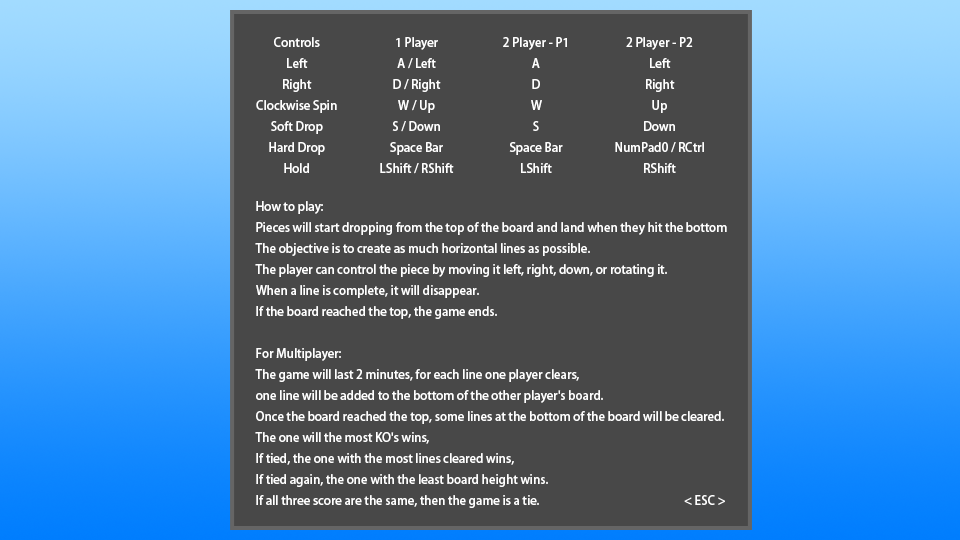
<style>
.page{position:relative;width:960px;height:540px;background:#484848}
.page>*{position:absolute;margin:0}
.t1{font:12px "AdobeFanHeitiStd-Bold";color:#ffffff}
</style>
<div class="page">
<p class="t1" style="left:256px;top:37px;width:81px;height:136px;text-align:center">Controls<br>Left<br>Right<br>Clockwise Spin<br>Soft Drop<br>Hard Drop<br>Hold</p>
<p class="t1" style="left:380px;top:37px;width:74px;height:137px;text-align:center">1 Player<br>A / Left<br>D / Right<br>W / Up<br>S / Down<br>Space Bar<br>LShift / RShift</p>
<p class="t1" style="left:503px;top:37px;width:64px;height:136px;text-align:center">2 Player - P1<br>A<br>D<br>W<br>S<br>Space Bar<br>LShift</p>
<p class="t1" style="left:615px;top:37px;width:89px;height:136px;text-align:center">2 Player - P2<br>Left<br>Right<br>Up<br>Down<br>NumPad0 / RCtrl<br>RShift</p>
<p class="t1" style="left:255px;top:201px;width:472px;height:307px">How to play:<br>Pieces will start dropping from the top of the board and land when they hit the bottom<br>The objective is to create as much horizontal lines as possible.<br>The player can control the piece by moving it left, right, down, or rotating it.<br>When a line is complete, it will disappear.<br>If the board reached the top, the game ends.<br><br>For Multiplayer:<br>The game will last 2 minutes, for each line one player clears, <br>one line will be added to the bottom of the other player's board.<br>Once the board reached the top, some lines at the bottom of the board will be cleared.<br>The one will the most KO's wins, <br>If tied, the one with the most lines cleared wins,<br>If tied again, the one with the least board height wins.<br>If all three score are the same, then the game is a tie.                &lt; ESC &gt;</p>
</div>
